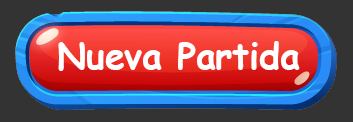
<style>
.page{position:relative;width:353px;height:122px;background:#333333}
.page>*{position:absolute;margin:0}
.t1{font:35.5px "ComicSansMS-Bold";color:#ffffff}
</style>
<div class="page">
<p class="t1" style="left:58px;top:41px;width:242px;height:30px">Nueva Partida</p>
</div>
